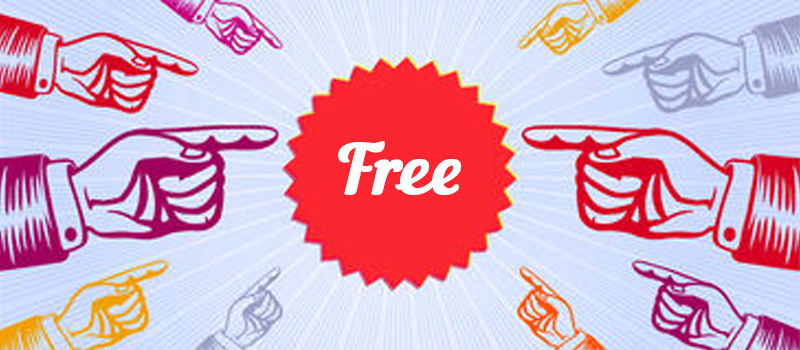
<style>
.page{position:relative;width:800px;height:350px}
.page>*{position:absolute;margin:0}
.t1{font:66.7px "NautilusPompilius";color:#fffefe;font-weight:bold;scale:1.1 1}
</style>
<div class="page">
<p class="t1" style="left:338px;top:141px;width:123px;height:54px">Free</p>
</div>
